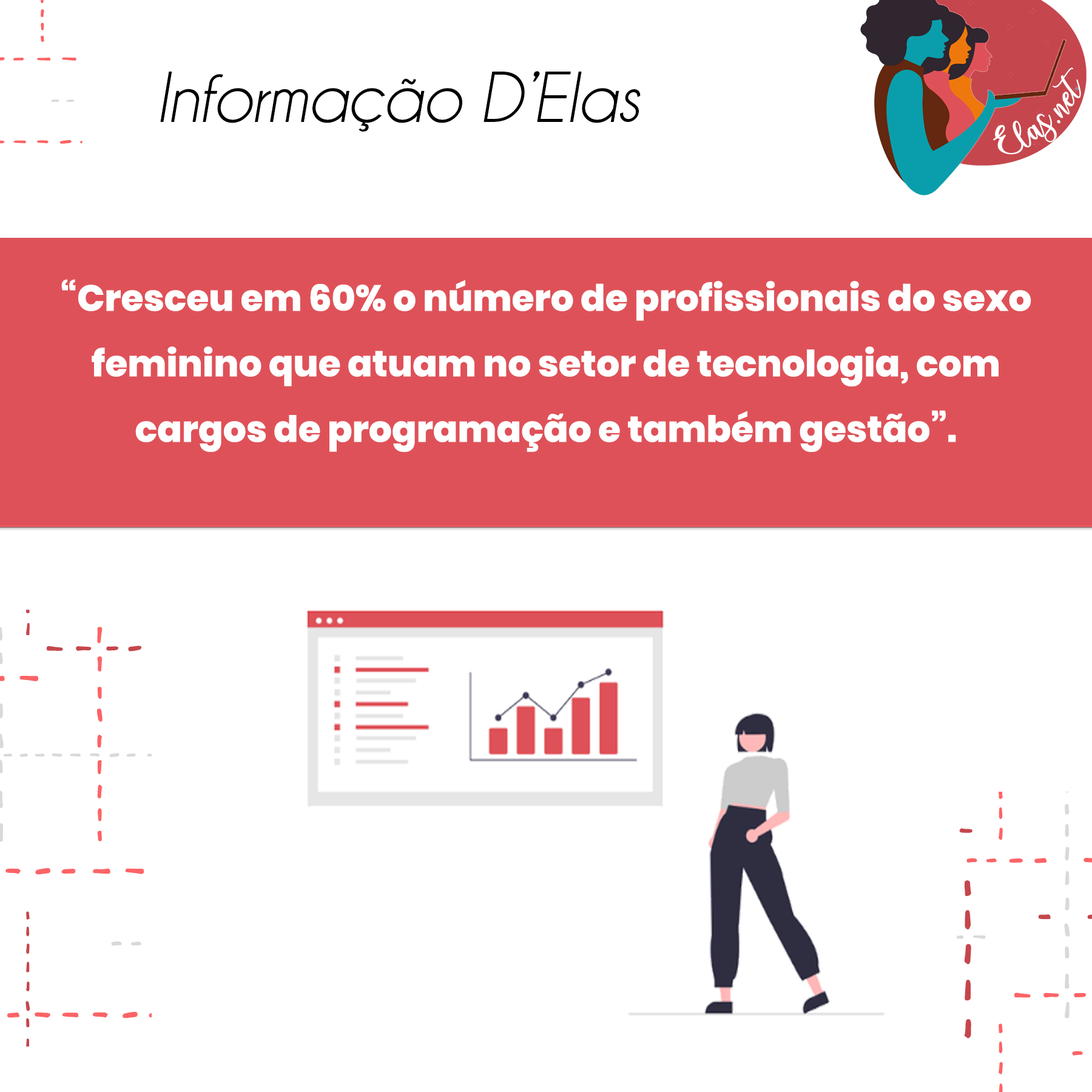
<style>
.page{position:relative;width:1092px;height:1092px;background:#ffffff}
.page>*{position:absolute;margin:0}
.t1{font:72.8px "Champagne&Limousines-Italic";color:#000000}
.t2{font:25px "charlinda-Regular";color:#ffffff;scale:1.18 1}
.t3{font:36.4px/65.5px "Poppins-ExtraBold";color:#ffffff}
</style>
<div class="page">
<p class="t1" style="left:160px;top:71px;width:481px;height:61px">Informação D’Elas</p>
<p class="t2" style="left:993px;top:67px;width:88px;height:88px;rotate:-42deg">Elas.net</p>
<p class="t3" style="left:61px;top:279px;width:970px;height:173px;text-align:center">“Cresceu em 60% o número de profissionais do sexo feminino que atuam no setor de tecnologia, com cargos de programação e também gestão”.</p>
</div>
